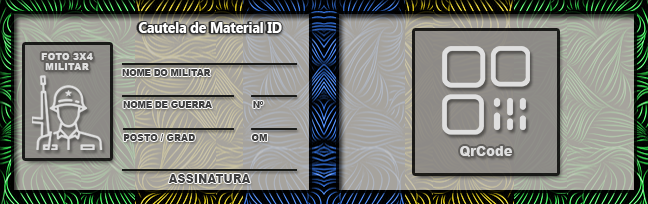
<style>
.page{position:relative;width:648px;height:204px}
.page>*{position:absolute;margin:0}
.t1{font:15.3px "MicrosoftNewTaiLue-Bold";color:#ffffff;scale:0.89 1}
.t2{font:10px/10.9px "Arial-Black";color:#dfdfdf;scale:0.95 1}
.t3{font:10px "Arial-Black";color:#3f3f3f;scale:0.86 1}
.t4{font:10px "Arial-Black";color:#3f3f3f;scale:0.87 1}
.t5{font:10px "Arial-Black";color:#3f3f3f;scale:0.91 1}
.t6{font:10px "Arial-Black";color:#3f3f3f;scale:0.89 1}
.t7{font:13.8px "Arial-Black";color:#dfdfdf;scale:0.95 1}
.t8{font:12px "Arial-Black";color:#3f3f3f;scale:0.94 1}
</style>
<div class="page">
<p class="t1" style="left:138px;top:22px;width:144px;height:11px">Cautela de Material ID</p>
<p class="t2" style="left:41px;top:53px;width:52px;height:17px;text-align:center">FOTO 3X4<br>MILITAR</p>
<p class="t3" style="left:122px;top:69px;width:89px;height:7px">NOME DO MILITAR</p>
<p class="t4" style="left:123px;top:101px;width:89px;height:7px">NOME DE GUERRA</p>
<p class="t3" style="left:253px;top:101px;width:11px;height:7px">Nº</p>
<p class="t5" style="left:123px;top:134px;width:72px;height:7px">POSTO / GRAD</p>
<p class="t6" style="left:251px;top:134px;width:16px;height:7px">OM</p>
<p class="t7" style="left:460px;top:146px;width:52px;height:11px">QrCode</p>
<p class="t8" style="left:168px;top:174px;width:83px;height:9px">ASSINATURA</p>
</div>
